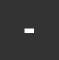
<style>
.page{position:relative;width:59px;height:60px;background:#333333}
.page>*{position:absolute;margin:0}
.t1{font:48px "MyriadPro-BoldCond";color:#ffffff}
</style>
<div class="page">
<p class="t1" style="left:24px;top:28px;width:10px;height:5px">-</p>
</div>
